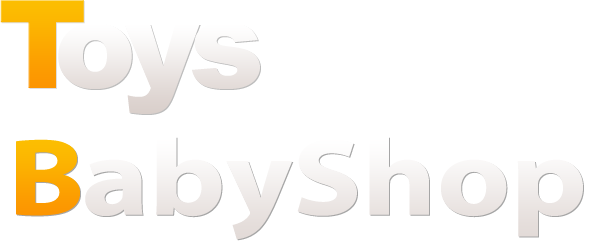
<style>
.page{position:relative;width:614px;height:251px;background:#ffffff}
.page>*{position:absolute;margin:0}
.t1{font:110px "MyriadPro-Bold";color:#f2eeec;scale:1.16 1}
.t2{font:110px "MyriadPro-Bold";color:#fcaa01;scale:1.16 1}
</style>
<div class="page">
<p class="t1" style="left:85px;top:136px;width:498px;height:104px">abyShop</p>
<p class="t2" style="left:16px;top:139px;width:64px;height:77px">B</p>
</div>
